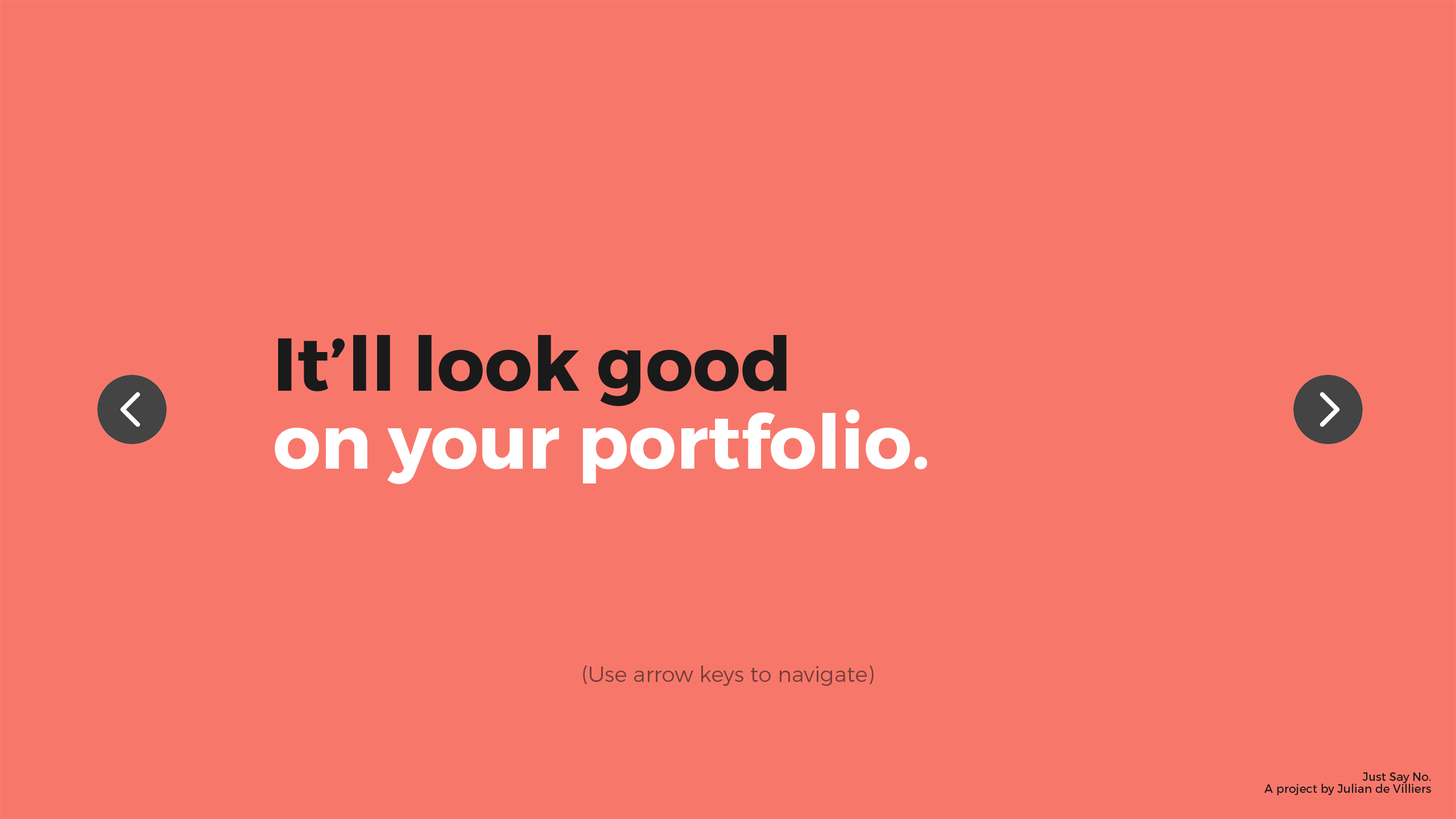
<style>
.page{position:relative;width:1456px;height:819px;background:#f7786b}
.page>*{position:absolute;margin:0}
.t1{font:75px/78.2px "Montserrat-Bold";color:#ffffff}
.t2{font:75px/78.2px "Montserrat-Bold";color:#1a1a1a}
.t3{font:21.6px "Montserrat-Light";color:#773e39}
.t4{font:11.7px/12.1px "Montserrat-Regular";color:#1a1a1a}
</style>
<div class="page">
<p class="t1" style="left:275px;top:335px;width:652px;height:149px"><span class="t2">It’ll look good<br></span>on your portfolio.</p>
<p class="t3" style="left:583px;top:665px;width:291px;height:21px">(Use arrow keys to navigate)</p>
<p class="t4" style="left:1264px;top:772px;width:167px;height:23px;text-align:right">Just Say No.<br>A project by Julian de Villiers</p>
</div>
